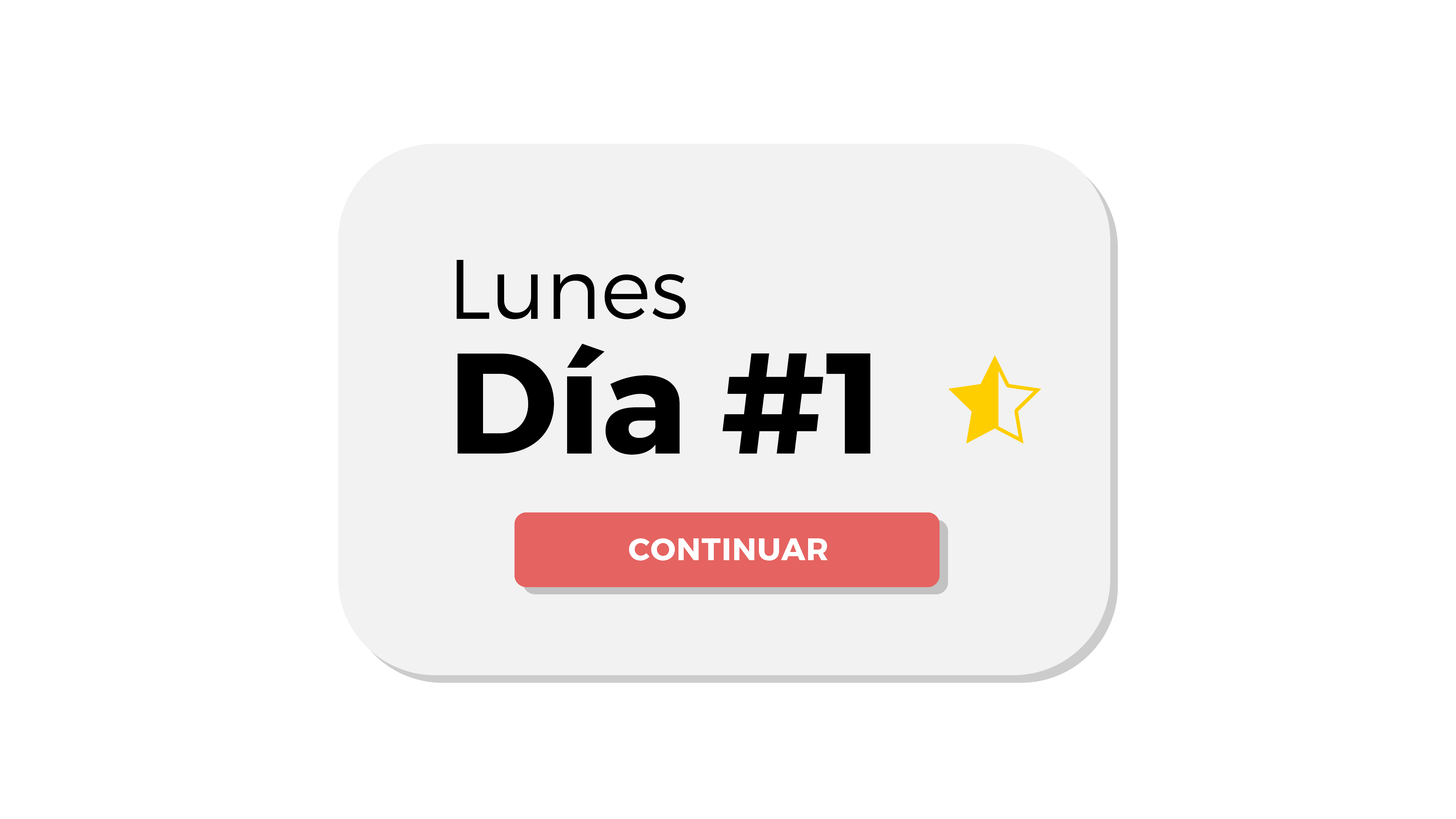
<style>
.page{position:relative;width:1456px;height:819px;background:#ffffff}
.page>*{position:absolute;margin:0}
.t1{font:84.3px "Montserrat-Light";color:#000000}
.t2{font:142.9px "Montserrat-Bold";color:#000000}
</style>
<div class="page">
<p class="t1" style="left:456px;top:260px;width:230px;height:59px">Lunes</p>
<p class="t2" style="left:458px;top:344px;width:412px;height:111px">Día #1</p>
</div>
